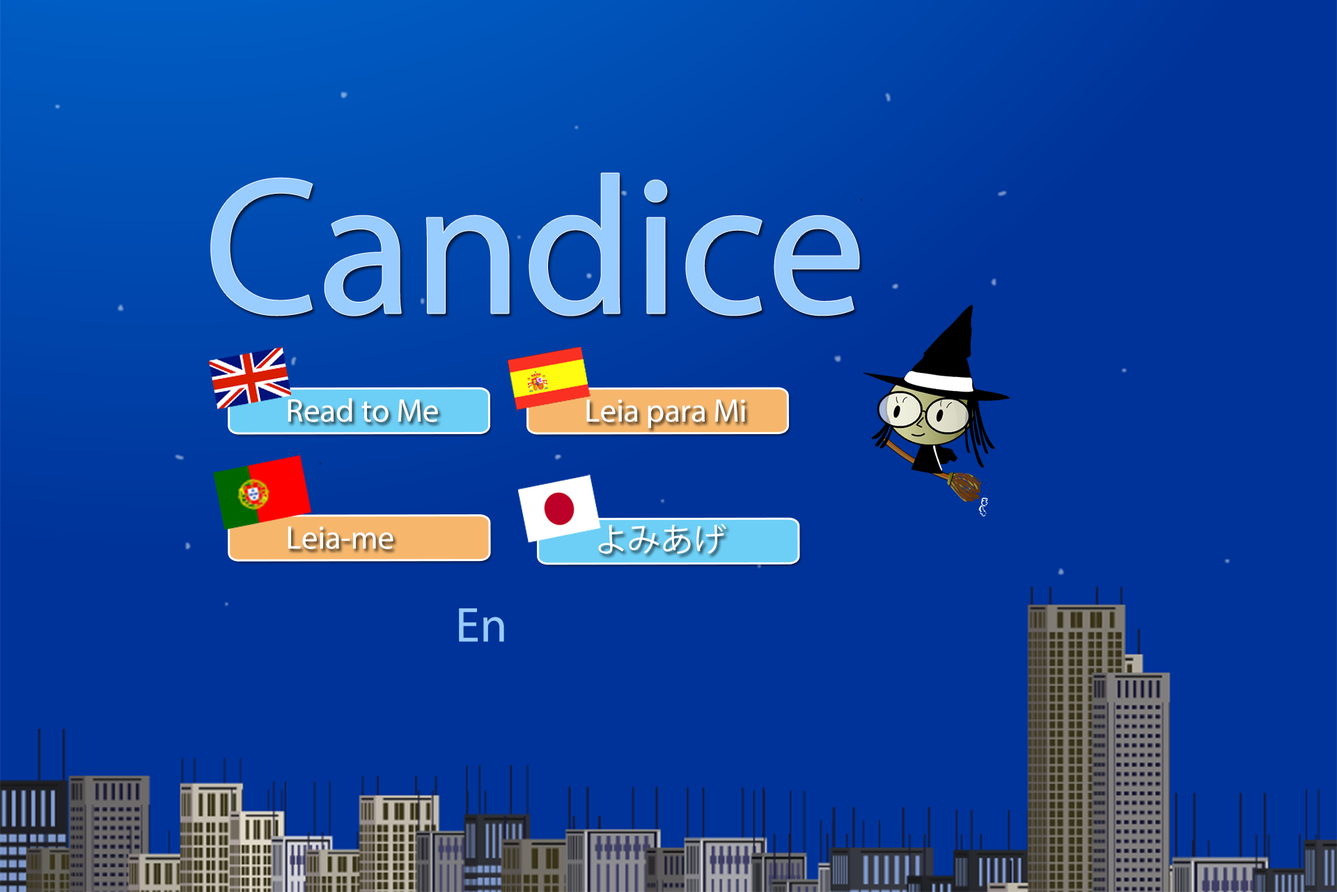
<style>
.page{position:relative;width:1337px;height:892px;background:#003399}
.page>*{position:absolute;margin:0}
.t1{font:196.8px "MyriadPro-Regular";color:#99ccff}
.t2{font:32.8px "MyriadPro-Regular";color:#ffffff}
.t3{font:32.7px "MyriadPro-Regular";color:#ffffff}
.t4{font:32.7px "KozGoPr6N-Regular";color:#ffffff}
.t5{font:49.2px "MyriadPro-Regular";color:#99ccff}
</style>
<div class="page">
<p class="t1" style="left:211px;top:173px;width:649px;height:143px">Candice</p>
<p class="t2" style="left:288px;top:398px;width:150px;height:24px">Read to Me</p>
<p class="t2" style="left:587px;top:399px;width:158px;height:29px">Leia para Mi</p>
<p class="t3" style="left:288px;top:526px;width:106px;height:23px">Leia-me</p>
<p class="t4" style="left:598px;top:523px;width:129px;height:31px">よみあげ</p>
<p class="t5" style="left:459px;top:608px;width:45px;height:34px">En</p>
</div>
